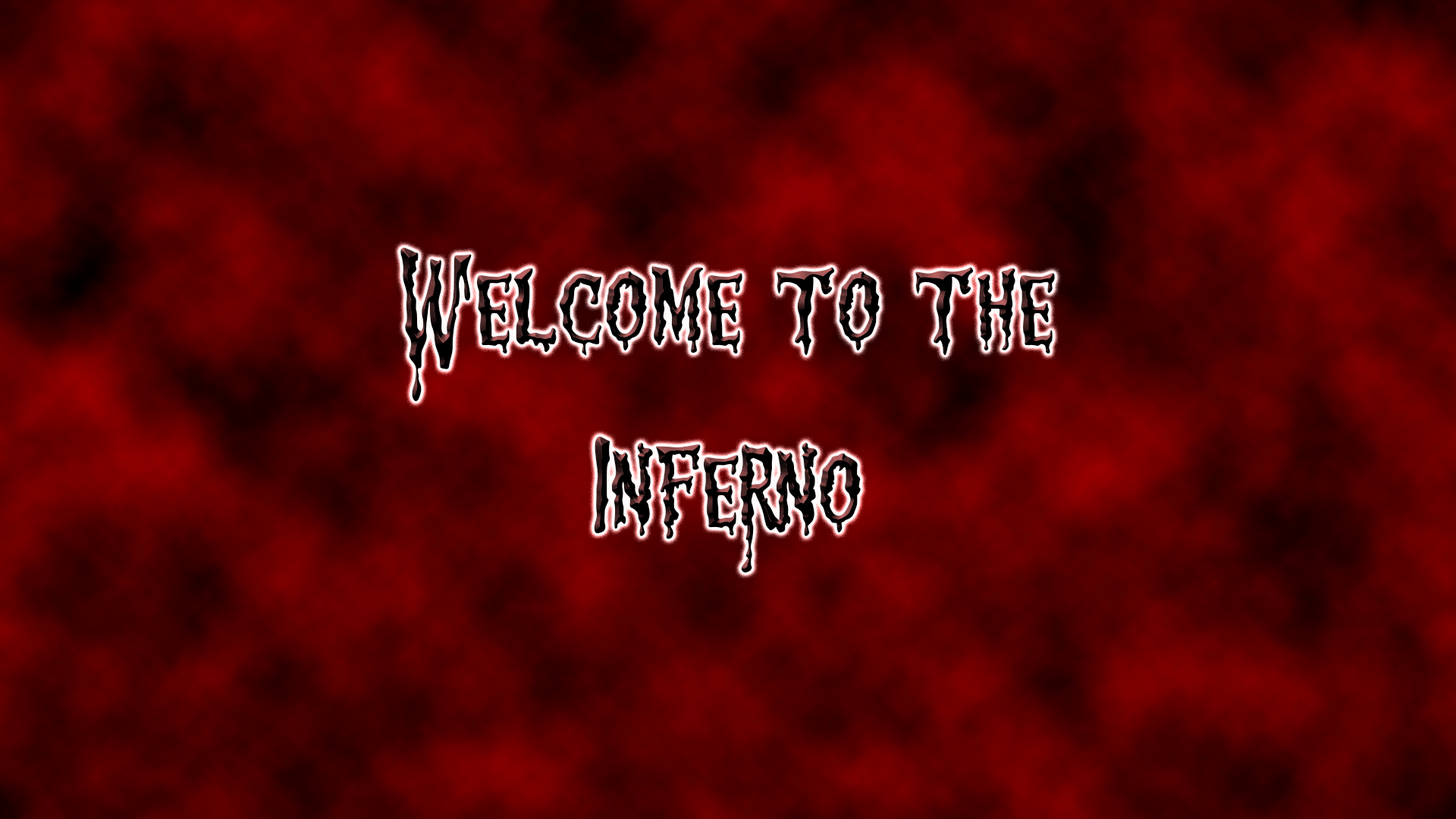
<style>
.page{position:relative;width:1456px;height:819px}
.page>*{position:absolute;margin:0}
.t1{font:151.7px "1313MockingbiRdLane";color:#000000}
</style>
<div class="page">
<p class="t1" style="left:400px;top:247px;width:655px;height:326px;text-align:center">Welcome to the<br>Inferno</p>
</div>
